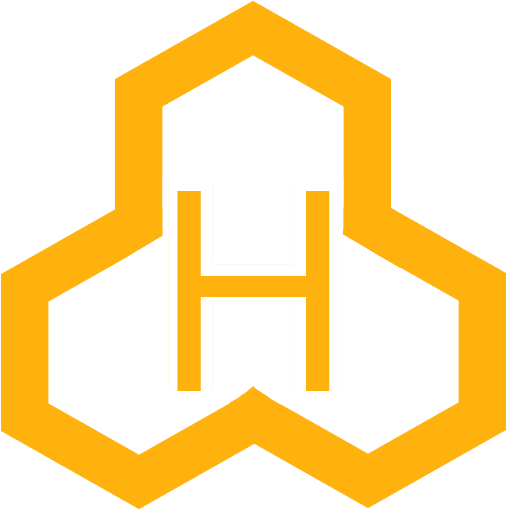
<style>
.page{position:relative;width:507px;height:510px;background:#ffffff}
.page>*{position:absolute;margin:0}
.t1{font:280px "OpenSans";color:#ffb10d}
</style>
<div class="page">
<p class="t1" style="left:177px;top:191px;width:153px;height:200px">H</p>
</div>
